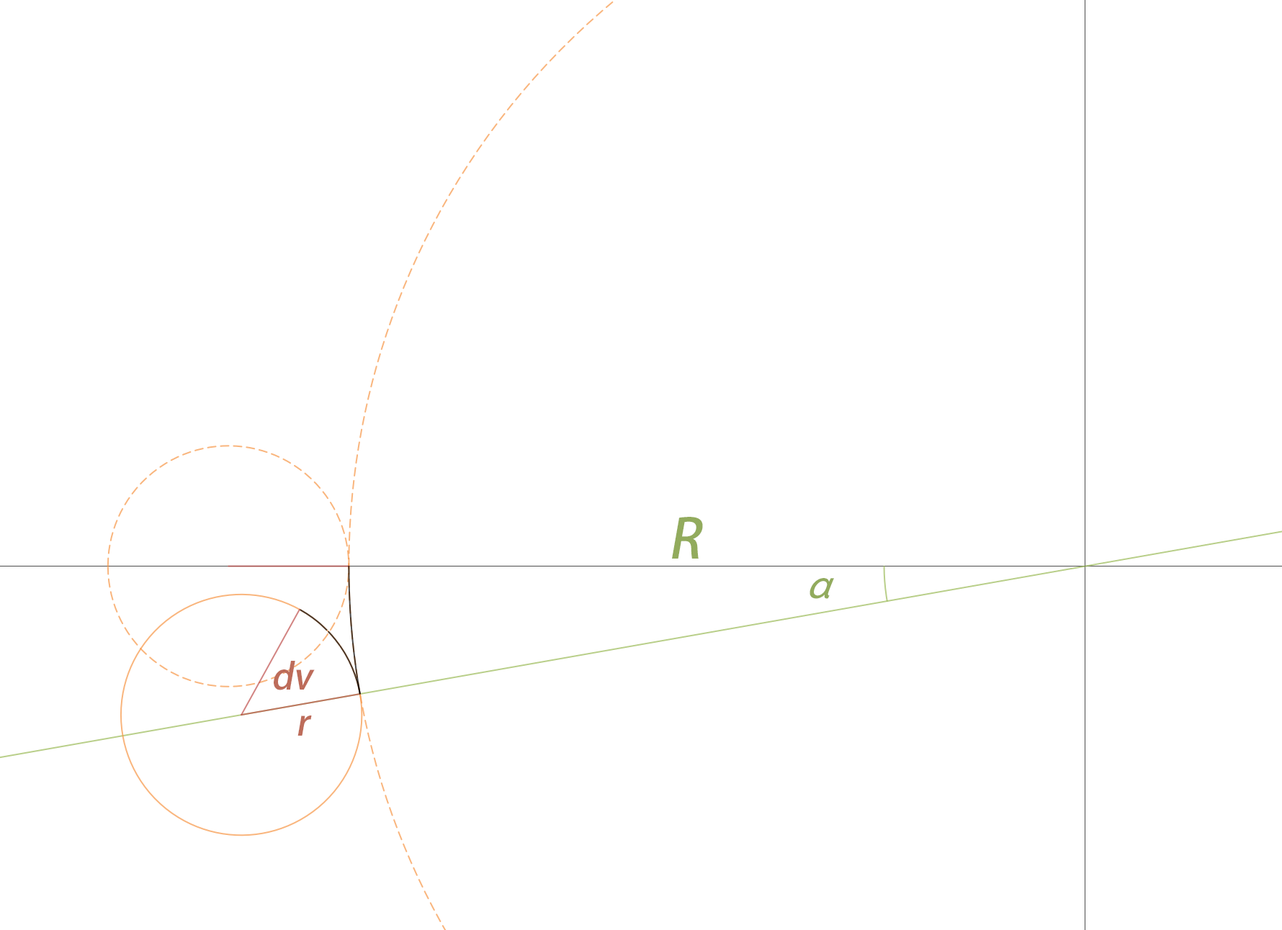
<style>
.page{position:relative;width:1282px;height:930px;background:#ffffff}
.page>*{position:absolute;margin:0}
.t1{font:54px "AdobeHeitiStd-Regular";color:#92ab5d;font-style:italic}
.t2{font:8.6px "AdobeHeitiStd-Regular";color:#92ab5d;font-style:italic}
.t3{font:36px "AdobeHeitiStd-Regular";color:#bd6c5a;font-style:italic}
</style>
<div class="page">
<p class="t1" style="left:672px;top:517px;width:31px;height:42px">R</p>
<p class="t2" style="left:809px;top:578px;width:25px;height:21px">α</p>
<p class="t3" style="left:274px;top:661px;width:41px;height:30px">dv</p>
<p class="t3" style="left:297px;top:716px;width:15px;height:20px">r</p>
</div>
